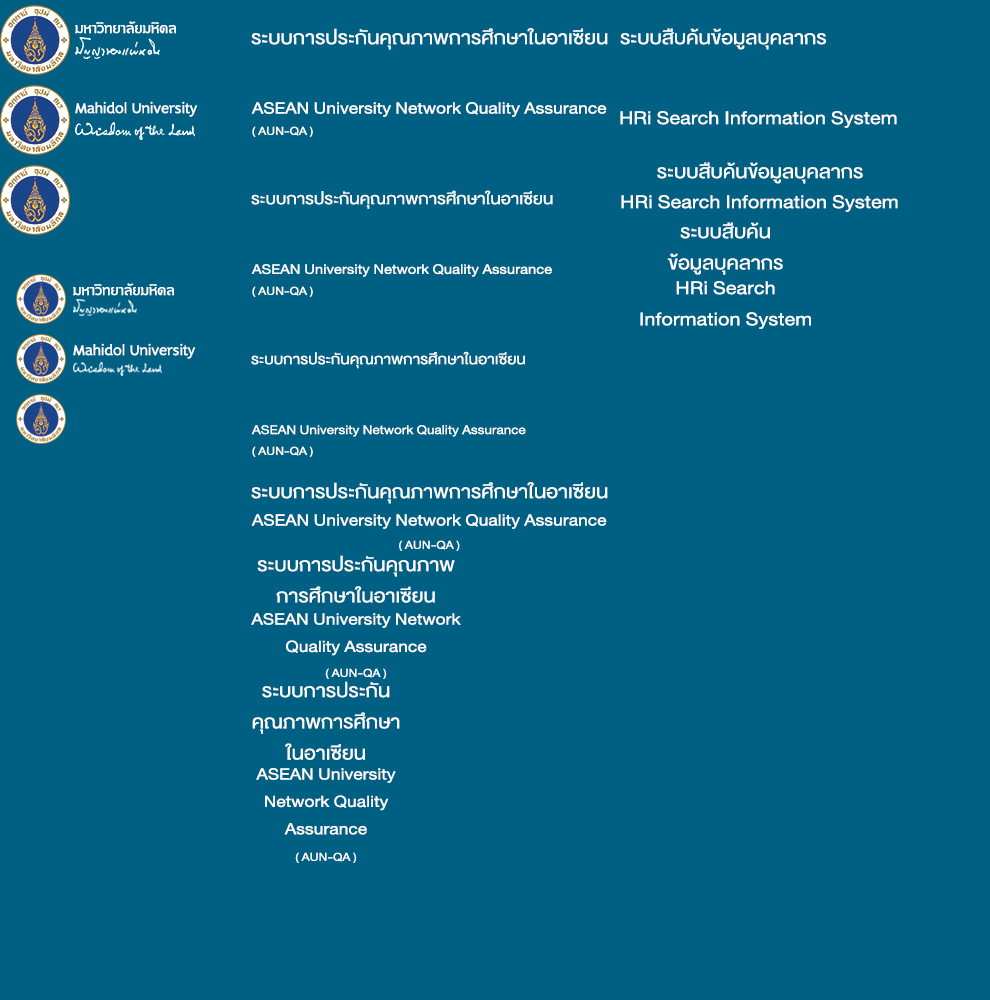
<style>
.page{position:relative;width:990px;height:1000px;background:#006084}
.page>*{position:absolute;margin:0}
.t1{font:18px "DBLimX";color:#ffffff}
.t2{font:26px "DBHelvethaicaX-55Regular";color:#ffffff;scale:1.13 1}
.t3{font:22.8px "DBHelvethaicaX-55Regular";color:#ffffff;scale:1.13 1}
.t4{font:16px "DBHelvethaicaX-55Regular";color:#ffffff;scale:1.13 1}
.t5{font:22px "DBHelvethaicaX-55Regular";color:#ffffff;scale:1.13 1}
.t6{font:19.3px "DBHelvethaicaX-55Regular";color:#ffffff;scale:1.13 1}
.t7{font:20px "DBHelvethaicaX-55Regular";color:#ffffff;scale:1.13 1}
.t8{font:17.6px "DBHelvethaicaX-55Regular";color:#ffffff;scale:1.13 1}
</style>
<div class="page">
<p class="t1" style="left:75px;top:21px;width:101px;height:13px">มหาวิทยาลัยมหิดล</p>
<p class="t2" style="left:251px;top:28px;width:357px;height:22px">ระบบการประกันคุณภาพการศึกษาในอาเซียน</p>
<p class="t2" style="left:620px;top:28px;width:206px;height:22px">ระบบสืบค้นข้อมูลบุคลากร</p>
<p class="t1" style="left:75px;top:101px;width:123px;height:16px">Mahidol University</p>
<p class="t3" style="left:251px;top:102px;width:356px;height:15px">ASEAN University Network Quality Assurance</p>
<p class="t2" style="left:620px;top:111px;width:277px;height:17px">HRi Search Information System</p>
<p class="t4" style="left:252px;top:126px;width:61px;height:11px">( AUN-QA )</p>
<p class="t2" style="left:657px;top:162px;width:206px;height:22px">ระบบสืบค้นข้อมูลบุคลากร</p>
<p class="t5" style="left:251px;top:190px;width:302px;height:19px">ระบบการประกันคุณภาพการศึกษาในอาเซียน</p>
<p class="t2" style="left:621px;top:195px;width:277px;height:17px">HRi Search Information System</p>
<p class="t2" style="left:667px;top:222px;width:116px;height:53px;text-align:center">ระบบสืบค้น<br>ข้อมูลบุคลากร</p>
<p class="t6" style="left:251px;top:264px;width:301px;height:13px">ASEAN University Network Quality Assurance</p>
<p class="t2" style="left:640px;top:281px;width:171px;height:48px;text-align:center">HRi Search<br>Information System</p>
<p class="t1" style="left:73px;top:283px;width:101px;height:13px">มหาวิทยาลัยมหิดล</p>
<p class="t4" style="left:252px;top:286px;width:61px;height:11px">( AUN-QA )</p>
<p class="t1" style="left:73px;top:343px;width:123px;height:16px">Mahidol University</p>
<p class="t7" style="left:251px;top:351px;width:274px;height:18px">ระบบการประกันคุณภาพการศึกษาในอาเซียน</p>
<p class="t8" style="left:251px;top:425px;width:275px;height:12px">ASEAN University Network Quality Assurance</p>
<p class="t4" style="left:252px;top:446px;width:61px;height:11px">( AUN-QA )</p>
<p class="t2" style="left:251px;top:482px;width:357px;height:22px">ระบบการประกันคุณภาพการศึกษาในอาเซียน</p>
<p class="t3" style="left:251px;top:514px;width:356px;height:15px">ASEAN University Network Quality Assurance</p>
<p class="t4" style="left:399px;top:540px;width:61px;height:11px">( AUN-QA )</p>
<p class="t2" style="left:257px;top:555px;width:198px;height:48px;text-align:center">ระบบการประกันคุณภาพ<br>การศึกษาในอาเซียน</p>
<p class="t3" style="left:251px;top:613px;width:210px;height:43px;text-align:center">ASEAN University Network<br>Quality Assurance</p>
<p class="t4" style="left:325px;top:668px;width:62px;height:11px">( AUN-QA )</p>
<p class="t2" style="left:252px;top:681px;width:148px;height:79px;text-align:center">ระบบการประกัน<br>คุณภาพการศึกษา<br>ในอาเซียน</p>
<p class="t3" style="left:256px;top:768px;width:140px;height:67px;text-align:center">ASEAN University<br>Network Quality<br>Assurance</p>
<p class="t4" style="left:295px;top:852px;width:62px;height:11px">( AUN-QA )</p>
</div>
